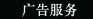
<style>
.page{position:relative;width:93px;height:19px;background:#060808}
.page>*{position:absolute;margin:0}
.t1{font:14px "STZhongsong";color:#e8f1f0}
</style>
<div class="page">
<p class="t1" style="left:21px;top:3px;width:57px;height:14px">广告服务</p>
</div>
